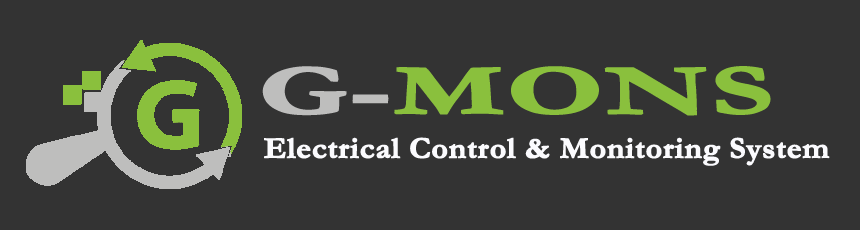
<style>
.page{position:relative;width:860px;height:230px;background:#333333}
.page>*{position:absolute;margin:0}
.t1{font:71.3px "Garamond-Bold";color:#8ac03d;font-weight:bold;scale:1.69 1}
.t2{font:71.3px "Garamond-Bold";color:#bebebd;font-weight:bold;scale:1.69 1}
.t3{font:30.2px "Garamond-Bold";color:#fbfbfe;font-weight:bold;scale:1.05 1}
</style>
<div class="page">
<p class="t1" style="left:262px;top:66px;width:509px;height:50px"><span class="t2">G-</span>MONS</p>
<p class="t3" style="left:264px;top:137px;width:566px;height:29px">Electrical Control &amp; Monitoring System</p>
</div>
